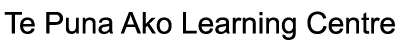
<style>
.page{position:relative;width:400px;height:50px;background:#ffffff}
.page>*{position:absolute;margin:0}
.t1{font:30px "ArialMT";color:#000000}
</style>
<div class="page">
<p class="t1" style="left:4px;top:11px;width:391px;height:29px">Te Puna Ako Learning Centre</p>
</div>
